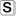
<style>
.page{position:relative;width:16px;height:16px;background:#ffffff}
.page>*{position:absolute;margin:0}
.t1{font:19px "Helvetica";color:#000000}
</style>
<div class="page">
<p class="t1" style="left:3px;top:2px;width:9px;height:11px">s</p>
</div>
